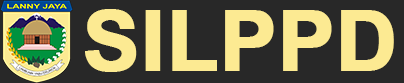
<style>
.page{position:relative;width:404px;height:83px;background:#282828}
.page>*{position:absolute;margin:0}
.t1{font:83.8px "Arial-BoldMT";color:#fcea92;font-weight:bold}
</style>
<div class="page">
<p class="t1" style="left:85px;top:9px;width:309px;height:63px">SILPPD</p>
</div>
